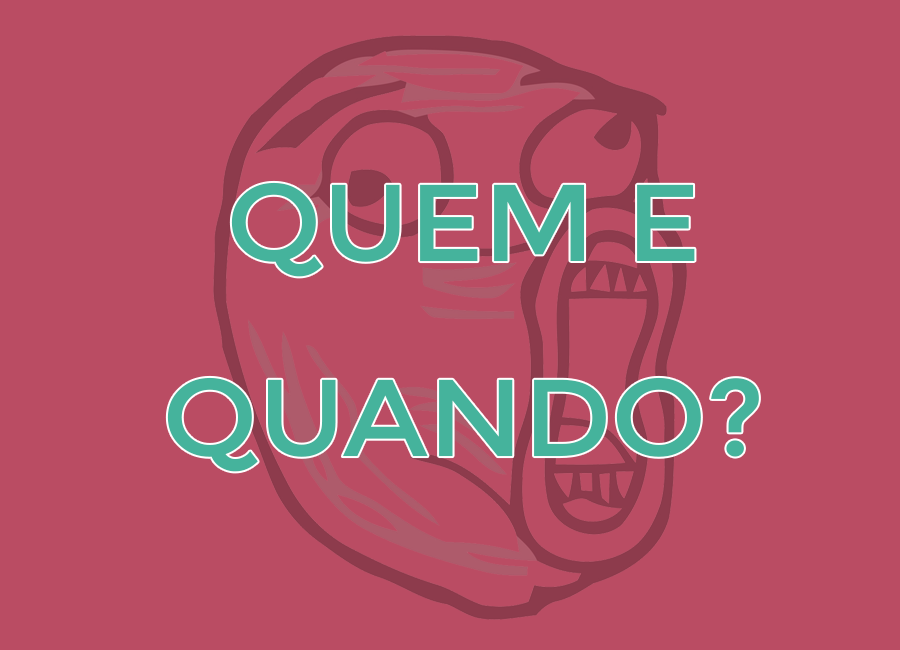
<style>
.page{position:relative;width:900px;height:650px;background:#ba4c63}
.page>*{position:absolute;margin:0}
.t1{font:109px/15px "Montserrat-Regular";color:#45b39c;scale:1.04 1}
</style>
<div class="page">
<p class="t1" style="left:167px;top:182px;width:592px;height:290px;text-align:center">QUEM E<br><br><br><br><br><br><br><br><br><br><br><br><br>QUANDO?</p>
</div>
